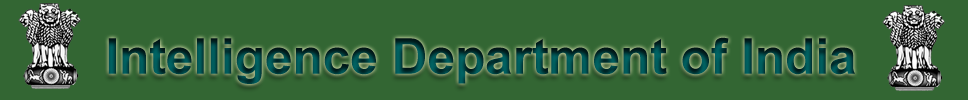
<style>
.page{position:relative;width:968px;height:100px;background:#336633}
.page>*{position:absolute;margin:0}
.t1{font:49.5px "Arial-BoldMT"}
</style>
<div class="page">
<p class="t1" style="left:108px;top:37px;width:747px;height:47px">Intelligence Department of India</p>
</div>
